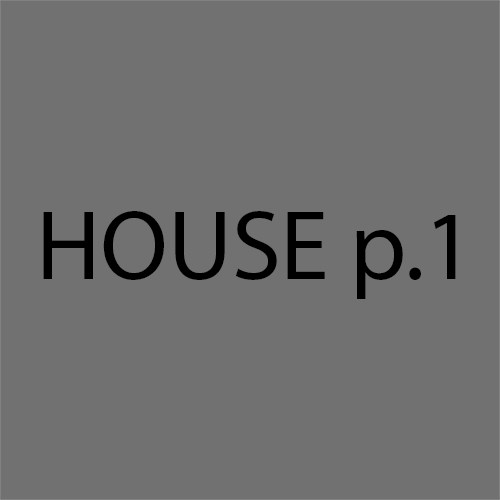
<style>
.page{position:relative;width:500px;height:500px;background:#717171}
.page>*{position:absolute;margin:0}
.t1{font:98.7px "MyriadPro-Regular";color:#000000}
</style>
<div class="page">
<p class="t1" style="left:43px;top:211px;width:413px;height:88px">HOUSE p.1</p>
</div>
